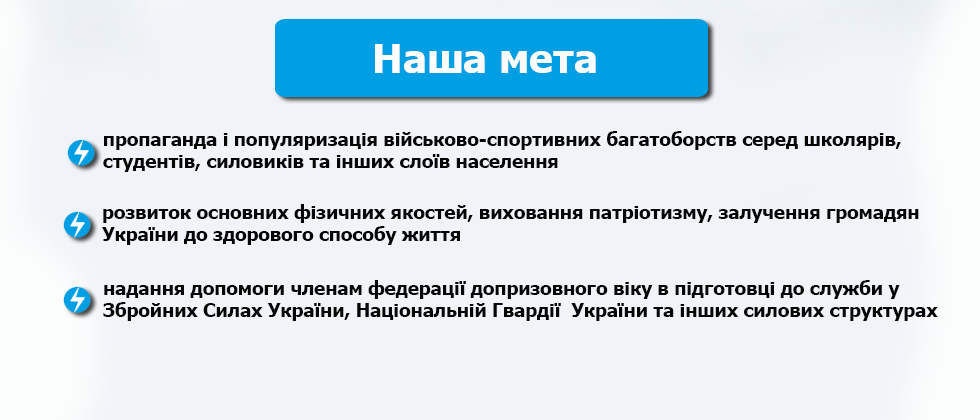
<style>
.page{position:relative;width:980px;height:420px;background:#f0f3f8}
.page>*{position:absolute;margin:0}
.t1{font:40px "Tahoma-Bold";color:#fbfcfc}
.t2{font:18.7px "Tahoma-Bold";color:#060606}
</style>
<div class="page">
<p class="t1" style="left:375px;top:44px;width:221px;height:29px">Наша мета</p>
<p class="t2" style="left:103px;top:131px;width:798px;height:41px">пропаганда і популяризація військово-спортивних багатоборств серед школярів, <br>студентів, силовиків та інших слоїв населення</p>
<p class="t2" style="left:102px;top:204px;width:817px;height:41px">розвиток основних фізичних якостей, виховання патріотизму, залучення громадян <br>України до здорового способу життя</p>
<p class="t2" style="left:103px;top:280px;width:835px;height:41px">надання допомоги членам федерації допризовного віку в підготовці до служби у <br>Збройних Силах України, Національній Гвардії  України та інших силових структурах</p>
</div>
